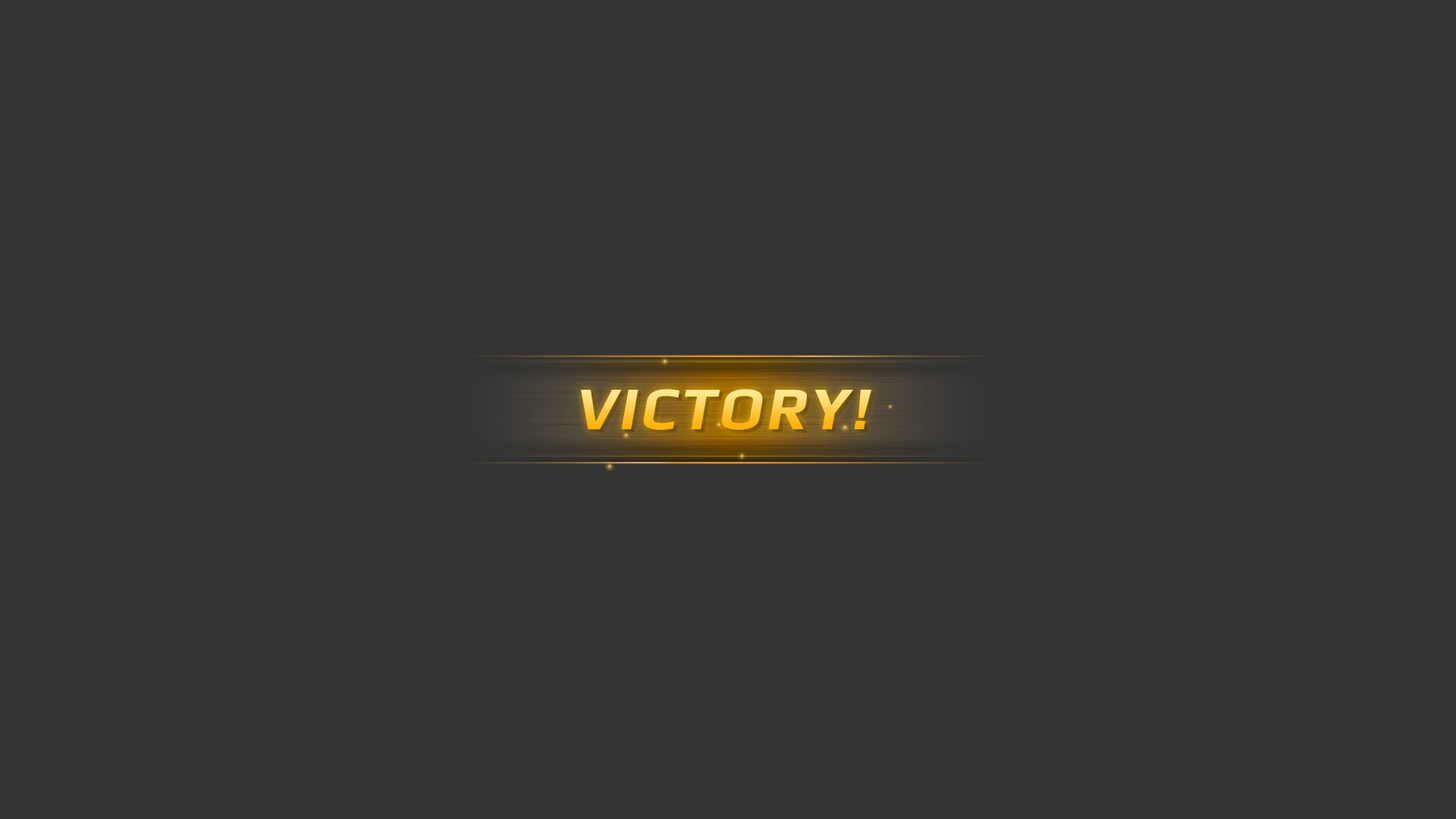
<style>
.page{position:relative;width:1456px;height:819px;background:#333333}
.page>*{position:absolute;margin:0}
.t1{font:60.7px "Play-Bold";letter-spacing:0.05em;font-style:italic}
</style>
<div class="page">
<p class="t1" style="left:581px;top:389px;width:290px;height:41px">VICTORY!</p>
</div>
